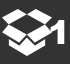
<style>
.page{position:relative;width:70px;height:64px;background:#333333}
.page>*{position:absolute;margin:0}
.t1{font:33.3px "Arial-Black";color:#ffffff}
</style>
<div class="page">
<p class="t1" style="left:50px;top:20px;width:15px;height:24px">1</p>
</div>
